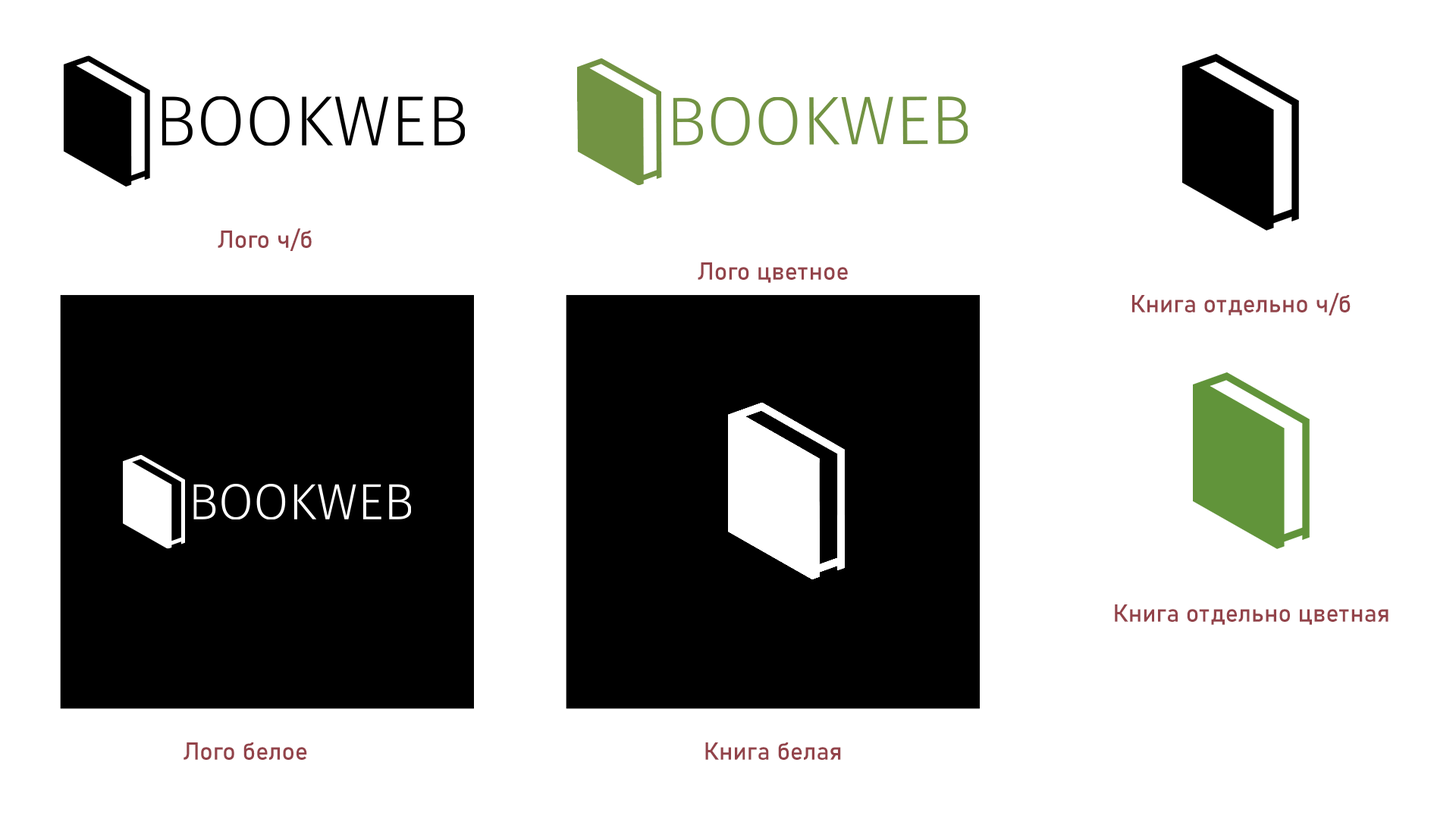
<style>
.page{position:relative;width:1456px;height:819px;background:#ffffff}
.page>*{position:absolute;margin:0}
.t1{font:24.3px "Bahnschrift";color:#93434a}
</style>
<div class="page">
<p class="t1" style="left:218px;top:228px;width:94px;height:23px">Лого ч/б</p>
<p class="t1" style="left:698px;top:262px;width:150px;height:21px">Лого цветное</p>
<p class="t1" style="left:1132px;top:293px;width:219px;height:22px">Книга отдельно ч/б</p>
<p class="t1" style="left:1115px;top:604px;width:273px;height:21px">Книга отдельно цветная</p>
<p class="t1" style="left:184px;top:742px;width:123px;height:18px">Лого белое</p>
<p class="t1" style="left:705px;top:742px;width:136px;height:18px">Книга белая</p>
</div>
